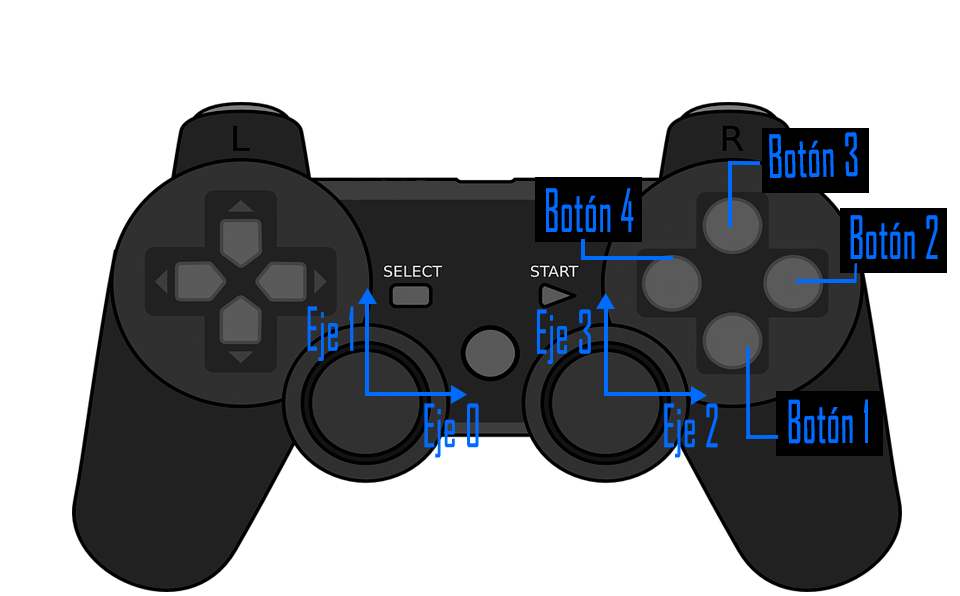
<style>
.page{position:relative;width:960px;height:596px;background:#ffffff}
.page>*{position:absolute;margin:0}
.t1{font:56.4px "AgencyFB-Reg";color:#006cff;font-weight:bold;scale:0.62 1}
.t2{font:56.5px "AgencyFB-Reg";color:#006cff;font-weight:bold;scale:0.62 1}
.t3{font:57.3px "AgencyFB-Reg";color:#006cff;font-weight:bold;scale:0.61 1}
.t4{font:56.3px "AgencyFB-Reg";color:#006cff;font-weight:bold;scale:0.62 1}
.t5{font:56.7px "AgencyFB-Reg";color:#006cff;font-weight:bold;scale:0.62 1}
.t6{font:56.6px "AgencyFB-Reg";color:#006cff;font-weight:bold;scale:0.62 1}
</style>
<div class="page">
<p class="t1" style="left:769px;top:132px;width:89px;height:47px;rotate:-1deg">Botón 3</p>
<p class="t2" style="left:546px;top:188px;width:88px;height:44px">Botón 4</p>
<p class="t1" style="left:850px;top:215px;width:88px;height:44px">Botón 2</p>
<p class="t3" style="left:307px;top:306px;width:47px;height:55px">Eje 1</p>
<p class="t3" style="left:537px;top:309px;width:54px;height:55px">Eje 3</p>
<p class="t4" style="left:788px;top:399px;width:80px;height:45px">Botón 1</p>
<p class="t5" style="left:424px;top:403px;width:55px;height:55px">Eje 0</p>
<p class="t6" style="left:664px;top:403px;width:54px;height:55px">Eje 2</p>
</div>
